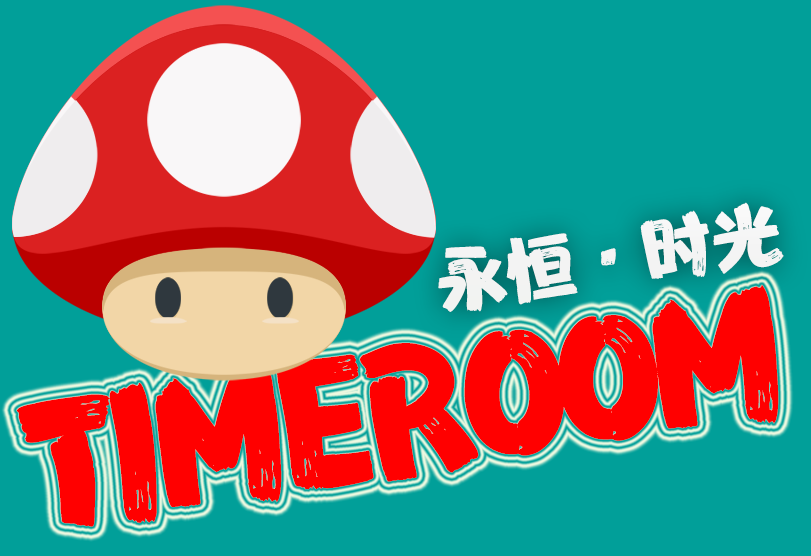
<style>
.page{position:relative;width:811px;height:556px;background:#019f99}
.page>*{position:absolute;margin:0}
.t1{font:69.6px "FZFENSTXJW--GB1-0";color:#ffffff}
.t2{font:162.8px "FZFENSTXJW--GB1-0";letter-spacing:-0.08em;color:#ff0000}
</style>
<div class="page">
<p class="t1" style="left:438px;top:202px;width:346px;height:110px;rotate:-9deg">永恒·时光</p>
<p class="t2" style="left:16px;top:285px;width:763px;height:242px;rotate:-9deg">TIMEROOM</p>
</div>
